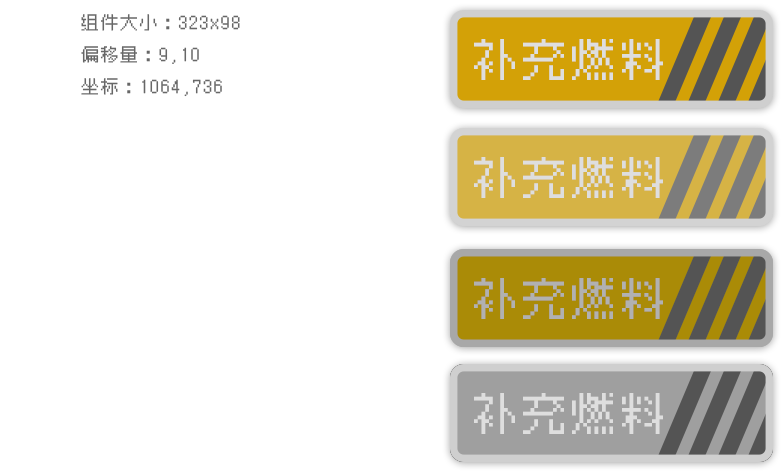
<style>
.page{position:relative;width:782px;height:472px;background:#ffffff}
.page>*{position:absolute;margin:0}
.t1{font:17.7px/31.8px "Zpix";color:#676767}
.t2{font:44.7px "Zpix";color:#dedede}
.t3{font:44.7px "Zpix";color:#b1b1b1}
</style>
<div class="page">
<p class="t1" style="left:81px;top:14px;width:159px;height:83px">组件大小：323x98<br>偏移量：9,10<br>坐标：1064,736</p>
<p class="t2" style="left:474px;top:39px;width:189px;height:41px">补充燃料</p>
<p class="t2" style="left:474px;top:157px;width:189px;height:41px">补充燃料</p>
<p class="t3" style="left:474px;top:278px;width:189px;height:41px">补充燃料</p>
<p class="t2" style="left:474px;top:393px;width:189px;height:41px">补充燃料</p>
</div>
